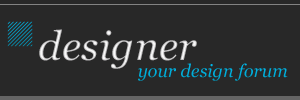
<style>
.page{position:relative;width:300px;height:100px;background:#282828}
.page>*{position:absolute;margin:0}
.t1{font:40.2px "Georgia-Italic";letter-spacing:0.01em}
.t2{font:17.6px "Georgia-Italic";letter-spacing:0.01em;color:#00aedc}
</style>
<div class="page">
<p class="t1" style="left:39px;top:29px;width:158px;height:40px">designer</p>
<p class="t2" style="left:138px;top:63px;width:150px;height:18px">your design forum</p>
</div>
